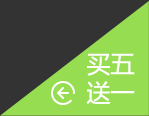
<style>
.page{position:relative;width:149px;height:116px;background:#333333}
.page>*{position:absolute;margin:0}
.t1{font:24px/29px "MicrosoftYaHei";color:#ffffff}
</style>
<div class="page">
<p class="t1" style="left:86px;top:53px;width:49px;height:52px">买五<br>送一</p>
</div>
